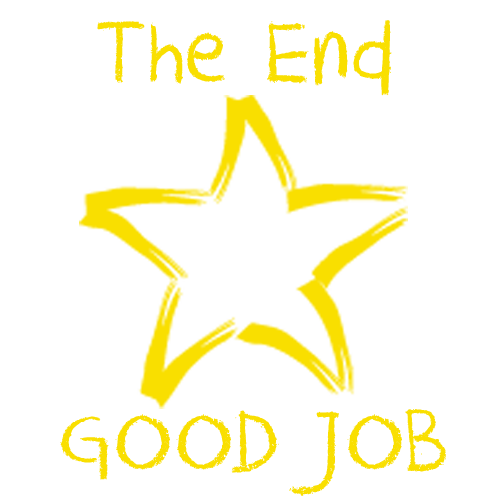
<style>
.page{position:relative;width:500px;height:500px;background:#ffffff}
.page>*{position:absolute;margin:0}
.t1{font:100px "DKCrayonCrumble";color:#fadf00}
</style>
<div class="page">
<p class="t1" style="left:97px;top:20px;width:295px;height:76px">The End</p>
<p class="t1" style="left:60px;top:409px;width:386px;height:87px">GOOD JOB</p>
</div>
